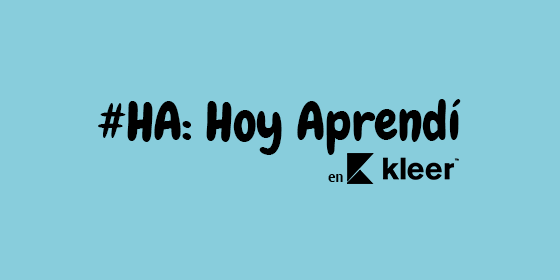
<style>
.page{position:relative;width:560px;height:280px;background:#88cddc}
.page>*{position:absolute;margin:0}
.t1{font:52.6px "Chewy";color:#000000}
.t2{font:14px "Roboto-Bold";color:#000000}
</style>
<div class="page">
<p class="t1" style="left:98px;top:99px;width:363px;height:56px">#HA: Hoy Aprendí</p>
<p class="t2" style="left:328px;top:174px;width:15px;height:8px">en</p>
</div>
